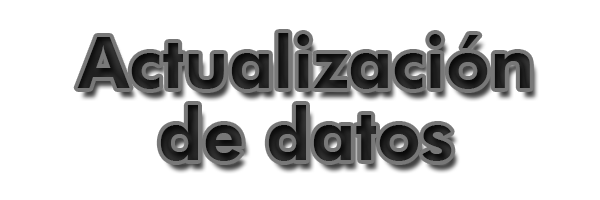
<style>
.page{position:relative;width:600px;height:200px;background:#ffffff}
.page>*{position:absolute;margin:0}
.t1{font:72px/36px "FuturaBT-Heavy";color:#1d1d1d}
</style>
<div class="page">
<p class="t1" style="left:77px;top:33px;width:453px;height:128px;text-align:center">Actualización<br><br>de datos</p>
</div>
